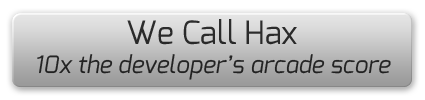
<style>
.page{position:relative;width:425px;height:100px}
.page>*{position:absolute;margin:0}
.t1{font:24px "Exo-Italic";color:#252525}
.t2{font:32px "Exo-Regular";color:#252525}
</style>
<div class="page">
<p class="t1" style="left:37px;top:19px;width:354px;height:61px;text-align:center"><span class="t2">We Call Hax<br></span>10x the developer’s arcade score</p>
</div>
